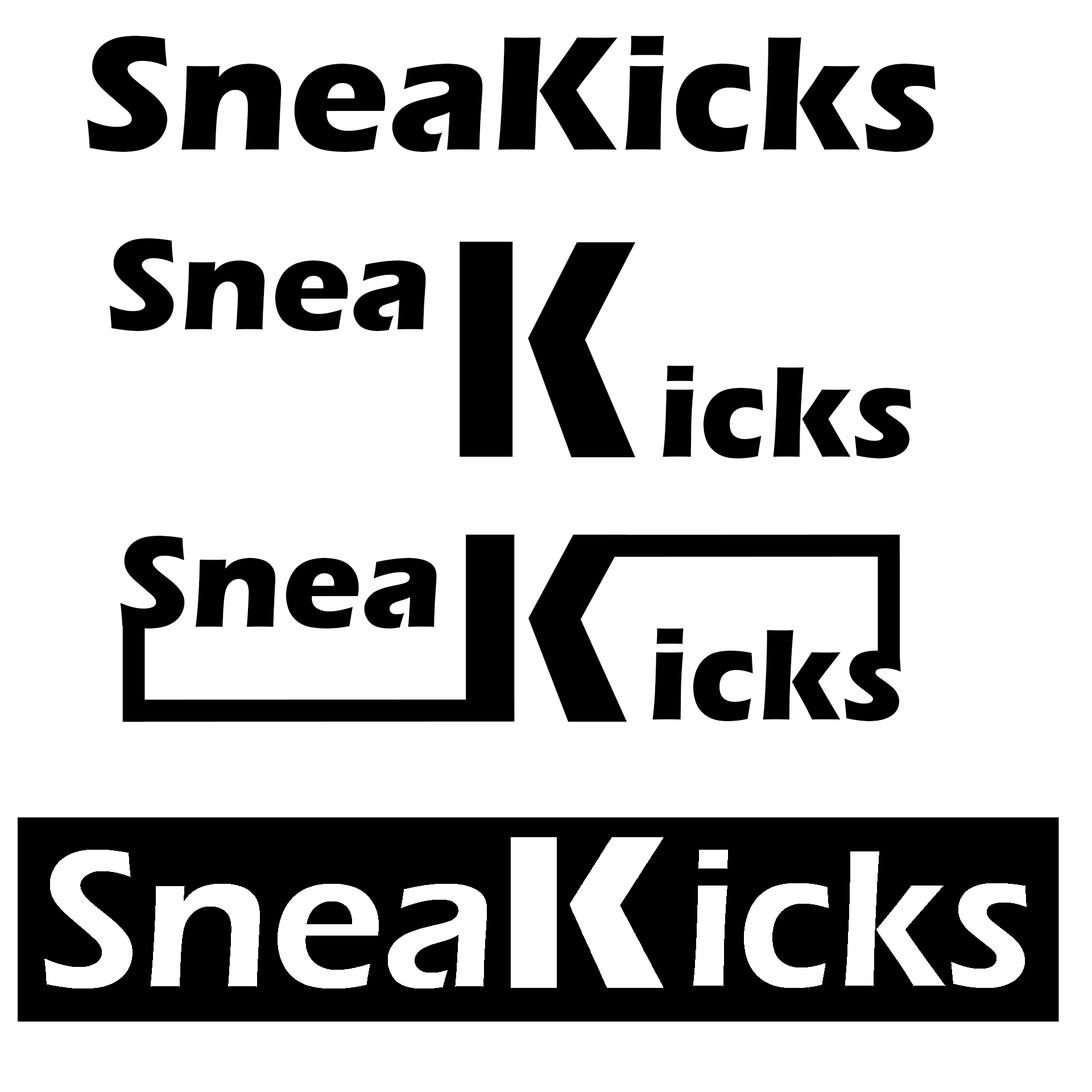
<style>
.page{position:relative;width:1092px;height:1092px;background:#ffffff}
.page>*{position:absolute;margin:0}
.t1{font:167.9px "ErasITC-Bold";color:#000000}
.t2{font:134.3px "ErasITC-Bold";color:#000000}
</style>
<div class="page">
<p class="t1" style="left:87px;top:36px;width:849px;height:116px">SneaKicks</p>
<p class="t2" style="left:109px;top:238px;width:317px;height:93px">Snea</p>
<p class="t2" style="left:663px;top:366px;width:248px;height:92px">icks</p>
<p class="t2" style="left:120px;top:536px;width:317px;height:92px">Snea</p>
<p class="t2" style="left:652px;top:628px;width:249px;height:93px">icks</p>
</div>
